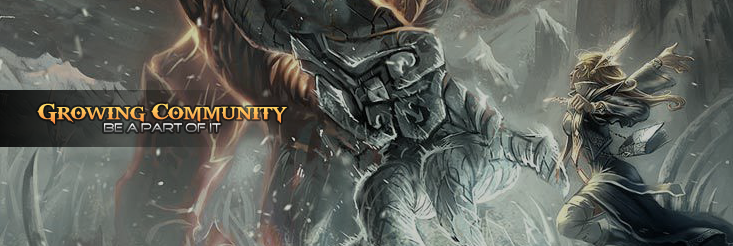
<style>
.page{position:relative;width:733px;height:246px}
.page>*{position:absolute;margin:0}
.t1{font:24px "GodOfWar";letter-spacing:-0.04em}
.t2{font:12px "GoodTimes";letter-spacing:-0.04em}
</style>
<div class="page">
<p class="t1" style="left:37px;top:103px;width:250px;height:21px">Growing Community</p>
<p class="t2" style="left:104px;top:123px;width:117px;height:9px">Be a part of it</p>
</div>
